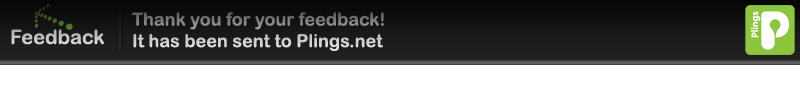
<style>
.page{position:relative;width:800px;height:100px;background:#ffffff}
.page>*{position:absolute;margin:0}
.t1{font:37.3px "DingsbumsBats";scale:1.06 1}
.t2{font:18px "ArialRoundedMTBold"}
.t3{font:20px "ArialRoundedMTBold";color:#c7c7c7}
</style>
<div class="page">
<p class="t1" style="left:35px;top:3px;width:38px;height:27px;rotate:180deg">l</p>
<p class="t2" style="left:132px;top:12px;width:252px;height:39px">Thank you for your feedback!<br>It has been sent to Plings.net</p>
<p class="t3" style="left:11px;top:29px;width:93px;height:16px">Feedback</p>
</div>
